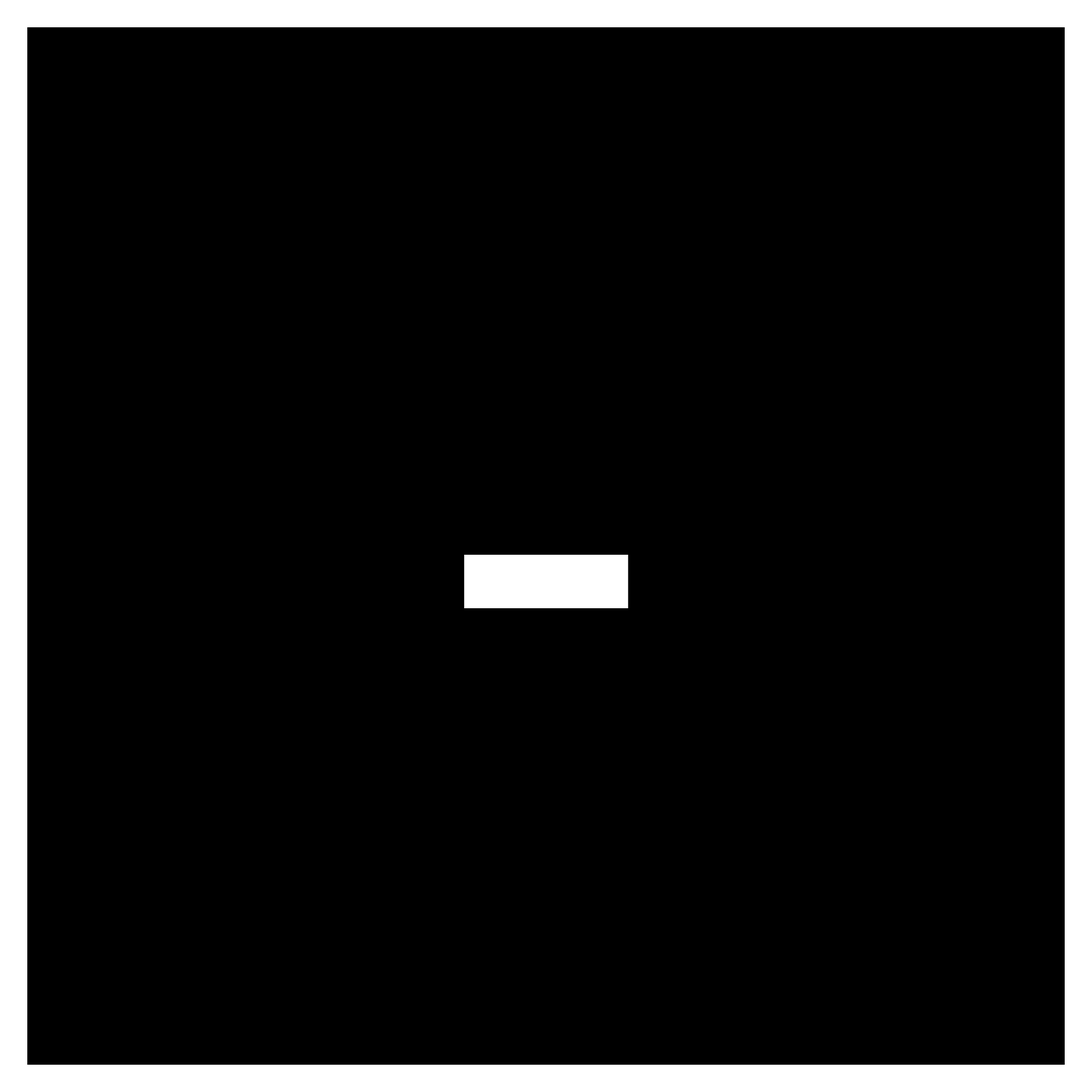
<style>
.page{position:relative;width:1092px;height:1092px;background:#000000}
.page>*{position:absolute;margin:0}
.t1{font:606.7px "ArialMT";color:#ffffff}
</style>
<div class="page">
<p class="t1" style="left:464px;top:555px;width:164px;height:53px">-</p>
</div>
